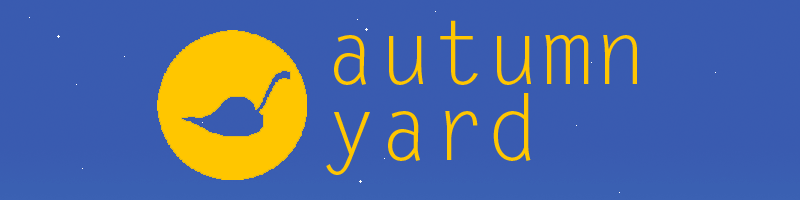
<style>
.page{position:relative;width:800px;height:200px;background:#395bb0}
.page>*{position:absolute;margin:0}
.t1{font:90px "LetterGothicStd";color:#ffc600}
</style>
<div class="page">
<p class="t1" style="left:334px;top:20px;width:303px;height:65px">autumn</p>
<p class="t1" style="left:326px;top:93px;width:205px;height:82px">yard</p>
</div>
